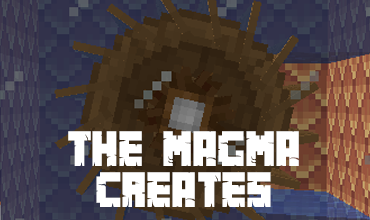
<style>
.page{position:relative;width:370px;height:220px}
.page>*{position:absolute;margin:0}
.t1{font:44.2px "MinecrafterAlt";color:#ffffff;scale:0.85 1}
</style>
<div class="page">
<p class="t1" style="left:68px;top:131px;width:231px;height:76px;text-align:center">THE MAGMA CREATES</p>
</div>
